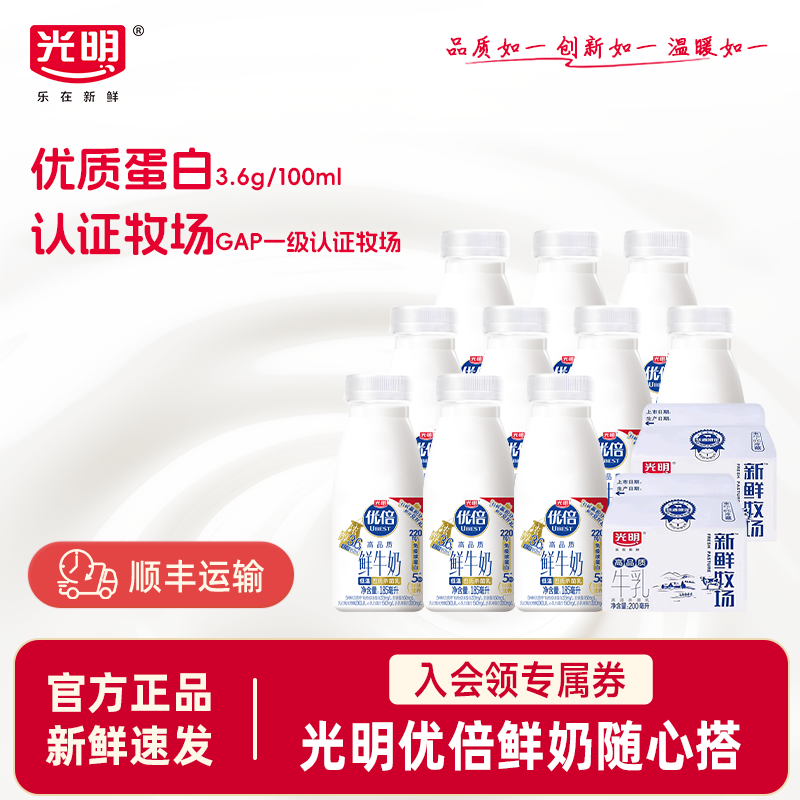
<style>
.page{position:relative;width:800px;height:800px}
.page>*{position:absolute;margin:0}
.t1{font:25.4px "ShouShuti";color:#e5002f;font-weight:bold}
.t2{font:23.1px/64.8px "AlimamaFangYuanTiVF-Bold";color:#e5002f}
.t3{font:46.1px/64.8px "AlimamaFangYuanTiVF-Bold";color:#e5002f}
.t4{font:36.3px "AlibabaPuHuiTiM";color:#fff8e9;scale:0.96 1}
.t5{font:39.7px "MiSans-Demibold";color:#ce002b;scale:0.9 1}
.t6{font:44.8px/53.8px "AlibabaPuHuiTiB";color:#fff8e9;scale:0.96 1}
.t7{font:55.9px "AlibabaPuHuiTiB";color:#ffffff;scale:0.9 1}
</style>
<div class="page">
<p class="t1" style="left:446px;top:35px;width:322px;height:24px">品质如一 创新如一 温暖如一</p>
<p class="t2" style="left:31px;top:147px;width:370px;height:109px"><span class="t3">优质蛋白</span>3.6g/100ml<br><span class="t3">认证牧场</span>GAP一级认证牧场</p>
<p class="t4" style="left:129px;top:559px;width:135px;height:35px">顺丰运输</p>
<p class="t5" style="left:414px;top:661px;width:212px;height:38px">入会领专属券</p>
<p class="t6" style="left:45px;top:672px;width:168px;height:95px;text-align:center">官方正品<br>新鲜速发</p>
<p class="t7" style="left:300px;top:719px;width:441px;height:53px">光明优倍鲜奶随心搭</p>
</div>
